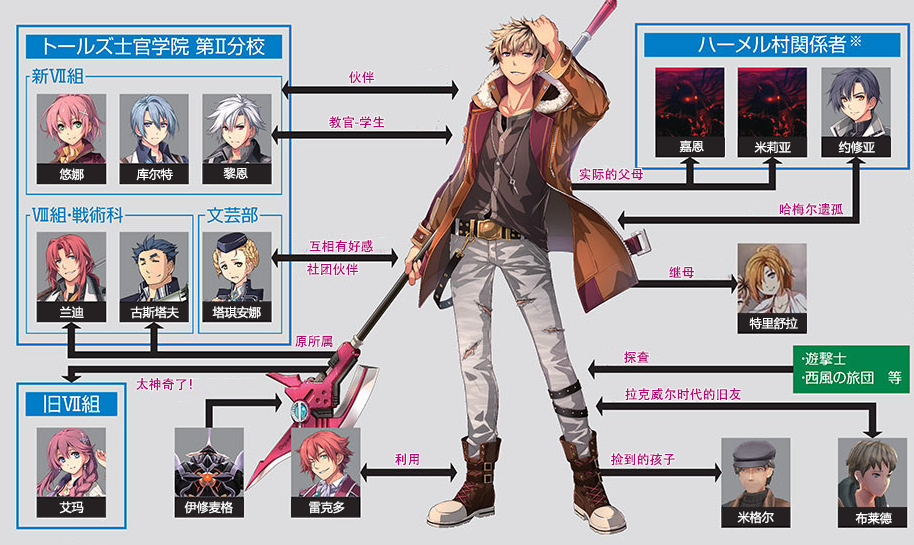
<style>
.page{position:relative;width:914px;height:545px;background:#dddddf}
.page>*{position:absolute;margin:0}
.t1{font:13px "AdobeHeitiStd-Regular";color:#b70773}
.t2{font:12px "MicrosoftYaHei";color:#ffffff}
</style>
<div class="page">
<p class="t1" style="left:349px;top:71px;width:25px;height:13px">伙伴</p>
<p class="t1" style="left:329px;top:116px;width:56px;height:13px">教官-学生</p>
<p class="t2" style="left:679px;top:140px;width:25px;height:13px">嘉恩</p>
<p class="t2" style="left:754px;top:141px;width:37px;height:13px">米莉亚</p>
<p class="t2" style="left:838px;top:141px;width:37px;height:13px">约修亚</p>
<p class="t2" style="left:59px;top:168px;width:25px;height:13px">悠娜</p>
<p class="t2" style="left:136px;top:168px;width:37px;height:13px">库尔特</p>
<p class="t2" style="left:223px;top:167px;width:25px;height:13px">黎恩</p>
<p class="t1" style="left:579px;top:168px;width:64px;height:13px">实际的父母</p>
<p class="t1" style="left:779px;top:203px;width:65px;height:13px">哈梅尔遗孤</p>
<p class="t1" style="left:309px;top:240px;width:64px;height:13px">互相有好感</p>
<p class="t1" style="left:307px;top:263px;width:51px;height:13px">社团伙伴</p>
<p class="t1" style="left:669px;top:266px;width:25px;height:13px">继母</p>
<p class="t2" style="left:60px;top:306px;width:24px;height:12px">兰迪</p>
<p class="t2" style="left:130px;top:306px;width:49px;height:13px">古斯塔夫</p>
<p class="t2" style="left:212px;top:306px;width:49px;height:13px">塔琪安娜</p>
<p class="t2" style="left:749px;top:317px;width:49px;height:13px">特里舒拉</p>
<p class="t1" style="left:295px;top:335px;width:38px;height:13px">原所属</p>
<p class="t1" style="left:624px;top:351px;width:26px;height:13px">探查</p>
<p class="t1" style="left:136px;top:378px;width:56px;height:13px">太神奇了！</p>
<p class="t1" style="left:625px;top:388px;width:116px;height:13px">拉克威尔时代的旧友</p>
<p class="t1" style="left:395px;top:453px;width:24px;height:13px">利用</p>
<p class="t1" style="left:611px;top:453px;width:64px;height:13px">捡到的孩子</p>
<p class="t2" style="left:59px;top:501px;width:25px;height:13px">艾玛</p>
<p class="t2" style="left:184px;top:501px;width:49px;height:13px">伊修麦格</p>
<p class="t2" style="left:309px;top:501px;width:36px;height:13px">雷克多</p>
<p class="t2" style="left:737px;top:511px;width:37px;height:13px">米格尔</p>
<p class="t2" style="left:855px;top:512px;width:37px;height:13px">布莱德</p>
</div>
